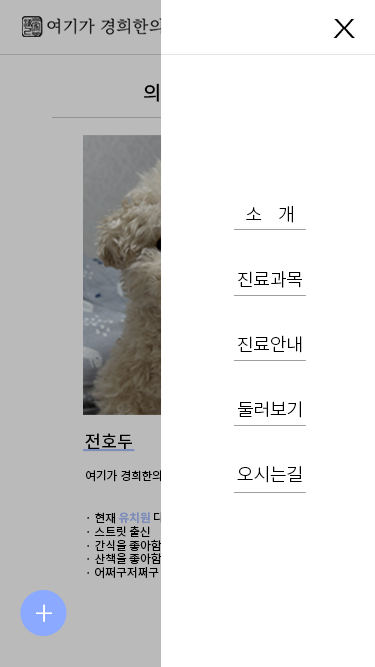
<style>
.page{position:relative;width:375px;height:667px;background:#ffffff}
.page>*{position:absolute;margin:0}
.t1{font:35px "NotoSansKR-Light";color:#000000;scale:1.43 1}
.t2{font:18px/65px "NotoSansKR-Light";color:#000000}
.t3{font:17.5px "NotoSansKR-Medium";color:#000000}
.t4{font:11.7px "NotoSansKR-Regular";color:#000000}
.t5{font:11.7px "NotoSansKR-Bold";color:#abc1ff}
.t6{font:35px "NotoSansKR-Light";color:#ffffff}
</style>
<div class="page">
<p class="t1" style="left:333px;top:19px;width:22px;height:19px">x</p>
<p class="t2" style="left:237px;top:205px;width:65px;height:278px;text-align:center">소    개<br>진료과목<br>진료안내<br>둘러보기<br>오시는길</p>
<p class="t3" style="left:85px;top:433px;width:47px;height:17px">전호두</p>
<p class="t4" style="left:86px;top:469px;width:134px;height:110px">여기가 경희한의원 <span class="t5">대표원장<br></span><br><br>· 현재 <span class="t5">유치원</span> 다니는 중<br>· 스트릿 출신<br>· 간식을 좋아함<br>· 산책을 좋아함<br>· 어쩌구저쩌구</p>
<p class="t6" style="left:36px;top:604px;width:16px;height:18px">+</p>
</div>
